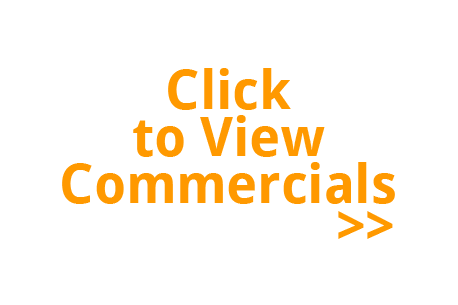
<style>
.page{position:relative;width:458px;height:305px;background:#ffffff}
.page>*{position:absolute;margin:0}
.t1{font:53.5px/47.2px "DroidSans-Bold";color:#ff9900}
.t2{font:53.5px "DroidSans-Bold";color:#ff9900}
</style>
<div class="page">
<p class="t1" style="left:62px;top:68px;width:333px;height:136px;text-align:center">Click<br>to View<br>Commercials</p>
<p class="t2" style="left:338px;top:211px;width:55px;height:28px">&gt;&gt;</p>
</div>
